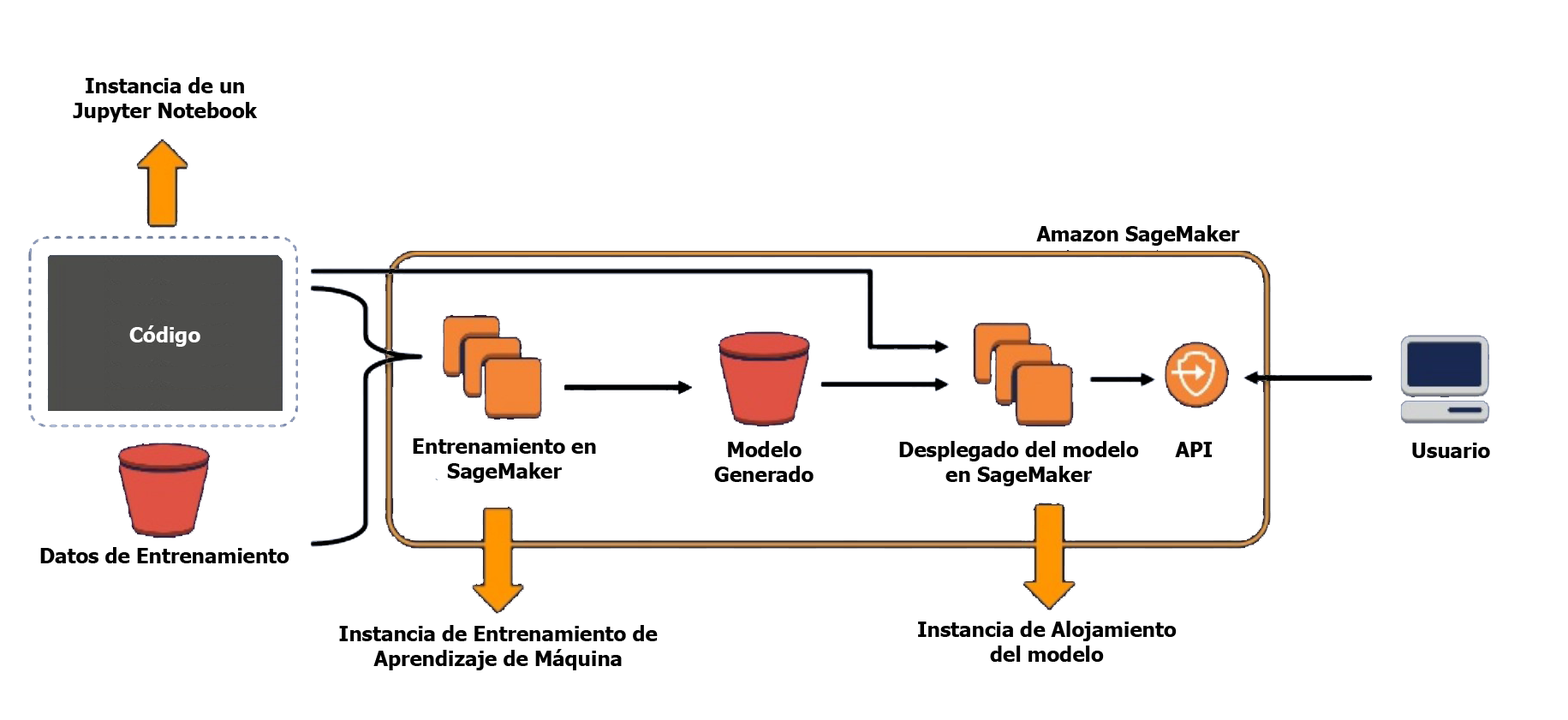
<style>
.page{position:relative;width:1568px;height:720px;background:#ffffff}
.page>*{position:absolute;margin:0}
.t1{font:20.6px "Tahoma-Bold";color:#000000}
.t2{font:20.6px "Tahoma-Bold";color:#ffffff}
</style>
<div class="page">
<p class="t1" style="left:73px;top:77px;width:185px;height:45px;text-align:center">Instancia de un<br>Jupyter Notebook</p>
<p class="t1" style="left:1036px;top:225px;width:204px;height:21px">Amazon SageMaker</p>
<p class="t2" style="left:129px;top:325px;width:71px;height:22px">Código</p>
<p class="t1" style="left:413px;top:438px;width:183px;height:45px;text-align:center">Entrenamiento en<br>SageMaker</p>
<p class="t1" style="left:714px;top:441px;width:100px;height:41px;text-align:center">Modelo<br>Generado</p>
<p class="t1" style="left:899px;top:441px;width:240px;height:45px;text-align:center">Desplegado del modelo<br>en SageMaker</p>
<p class="t1" style="left:1175px;top:442px;width:37px;height:15px">API</p>
<p class="t1" style="left:1412px;top:443px;width:78px;height:15px">Usuario</p>
<p class="t1" style="left:40px;top:547px;width:249px;height:16px">Datos de Entrenamiento</p>
<p class="t1" style="left:339px;top:625px;width:319px;height:46px;text-align:center">Instancia de Entrenamiento de<br>Aprendizaje de Máquina</p>
<p class="t1" style="left:918px;top:621px;width:259px;height:41px;text-align:center">Instancia de Alojamiento<br>del modelo</p>
</div>
